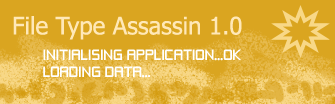
<style>
.page{position:relative;width:335px;height:104px;background:#daa520}
.page>*{position:absolute;margin:0}
.t1{font:24px "Tahoma";color:#ffe8b7}
.t2{font:14px "ZeroThrees";color:#ffffff}
</style>
<div class="page">
<p class="t1" style="left:13px;top:16px;width:229px;height:24px">File Type Assassin 1.0</p>
<p class="t2" style="left:43px;top:49px;width:198px;height:29px">INITIALISING APPLICATION...OK<br>LOADING DATA...</p>
</div>
